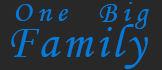
<style>
.page{position:relative;width:162px;height:70px;background:#282829}
.page>*{position:absolute;margin:0}
.t1{font:30px "MonotypeCorsiva";letter-spacing:0.2em;color:#007bd9}
.t2{font:22px "MonotypeCorsiva";color:#85939f}
.t3{font:48px "MonotypeCorsiva";letter-spacing:0.08em;color:#007bd9}
</style>
<div class="page">
<p class="t1" style="left:15px;top:2px;width:134px;height:27px"><span class="t2"> </span>One  Big</p>
<p class="t3" style="left:11px;top:24px;width:137px;height:45px">Family</p>
</div>
